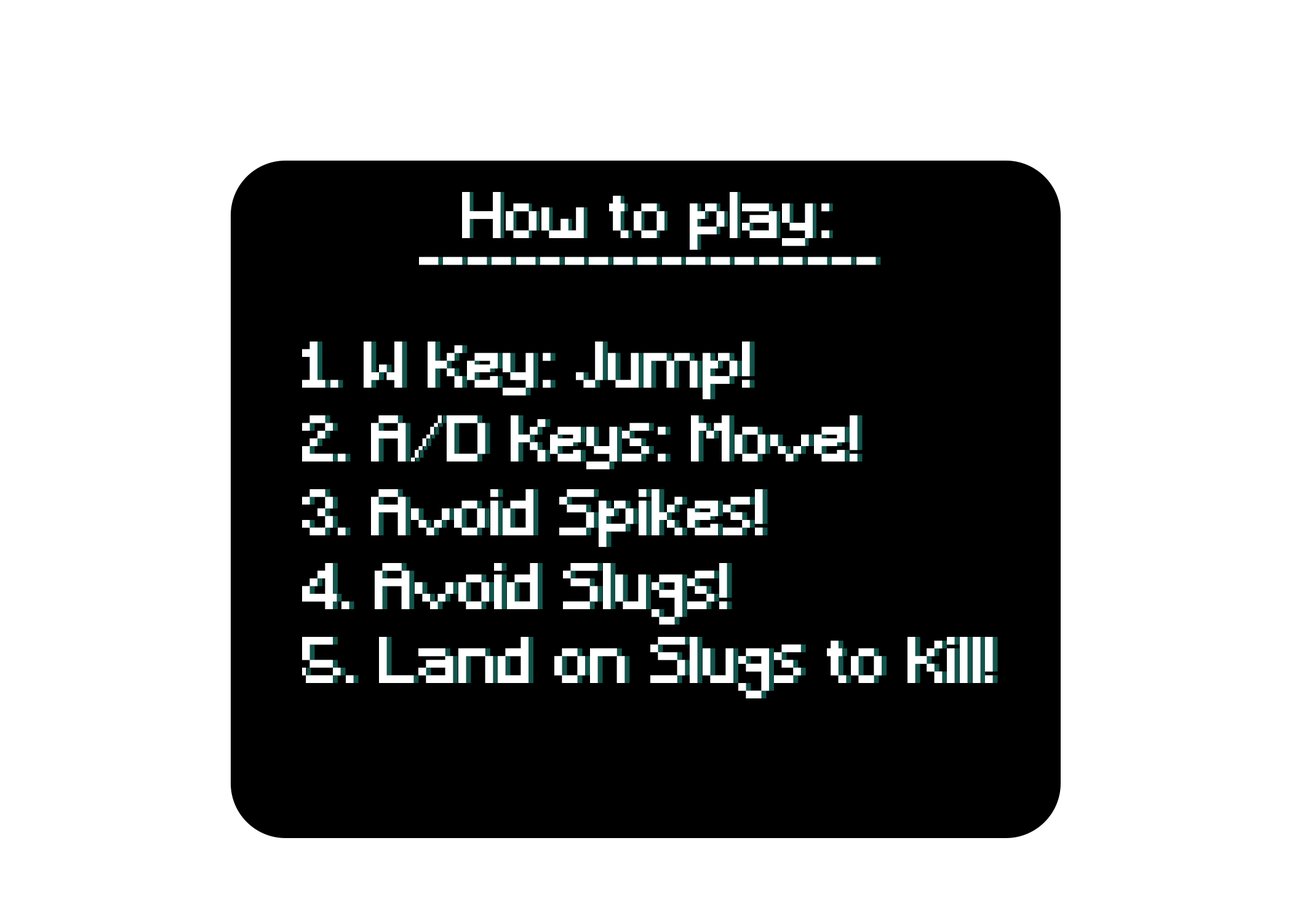
<style>
.page{position:relative;width:1292px;height:923px;background:#ffffff}
.page>*{position:absolute;margin:0}
.t1{font:61.5px "Minecraft";letter-spacing:0.02em;color:#ffffff}
.t2{font:61.5px "Minecraft";letter-spacing:0.02em}
</style>
<div class="page">
<p class="t1" style="left:462px;top:192px;width:367px;height:58px">How to play:</p>
<p class="t2" style="left:466px;top:192px;width:367px;height:58px">How to play:</p>
<p class="t1" style="left:419px;top:257px;width:457px;height:8px">-------------------</p>
<p class="t1" style="left:302px;top:341px;width:691px;height:357px">1. W Key: Jump!<br>2. A/D Keys: Move!<br>3. Avoid Spikes!<br>4. Avoid Slugs!<br>5. Land on Slugs to Kill!</p>
<p class="t2" style="left:307px;top:341px;width:691px;height:357px">1. W Key: Jump!<br>2. A/D Keys: Move!<br>3. Avoid Spikes!<br>4. Avoid Slugs!<br>5. Land on Slugs to Kill!</p>
</div>
